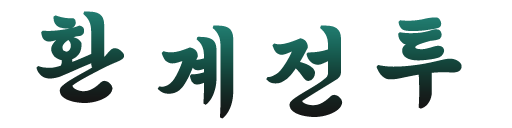
<style>
.page{position:relative;width:512px;height:128px;background:#ffffff}
.page>*{position:absolute;margin:0}
.t1{font:98.3px "SolmoeKimDaeGeonM";letter-spacing:0.14em;font-weight:bold}
</style>
<div class="page">
<p class="t1" style="left:36px;top:11px;width:88px;height:92px">환</p>
<p class="t1" style="left:376px;top:17px;width:86px;height:92px">투</p>
<p class="t1" style="left:157px;top:25px;width:77px;height:94px">계</p>
<p class="t1" style="left:266px;top:25px;width:77px;height:92px">전</p>
</div>
